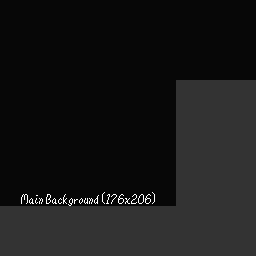
<style>
.page{position:relative;width:256px;height:256px;background:#070707}
.page>*{position:absolute;margin:0}
.t1{font:12px "Mario64";color:#ffffff}
</style>
<div class="page">
<p class="t1" style="left:21px;top:192px;width:134px;height:14px">Main Background (176x206)</p>
</div>
